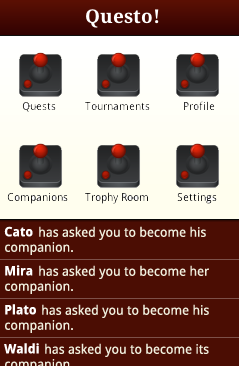
<style>
.page{position:relative;width:239px;height:366px;background:#4b0d03}
.page>*{position:absolute;margin:0}
.t1{font:13px "DroidSans-Bold";color:#ffffff}
.t2{font:13px "DroidSans";color:#f0efde}
</style>
<div class="page">
<p class="t1" style="left:4px;top:226px;width:29px;height:11px">Cato</p>
<p class="t2" style="left:39px;top:226px;width:167px;height:14px">has asked you to become his</p>
<p class="t2" style="left:5px;top:242px;width:68px;height:13px">companion.</p>
<p class="t1" style="left:5px;top:265px;width:28px;height:11px">Mira</p>
<p class="t2" style="left:39px;top:265px;width:170px;height:14px">has asked you to become her</p>
<p class="t2" style="left:5px;top:281px;width:68px;height:13px">companion.</p>
<p class="t1" style="left:5px;top:304px;width:31px;height:11px">Plato</p>
<p class="t2" style="left:42px;top:304px;width:167px;height:14px">has asked you to become his</p>
<p class="t2" style="left:5px;top:320px;width:68px;height:13px">companion.</p>
<p class="t1" style="left:4px;top:343px;width:35px;height:11px">Waldi</p>
<p class="t2" style="left:45px;top:343px;width:164px;height:14px">has asked you to become its</p>
<p class="t2" style="left:5px;top:359px;width:65px;height:7px">companion.</p>
</div>
